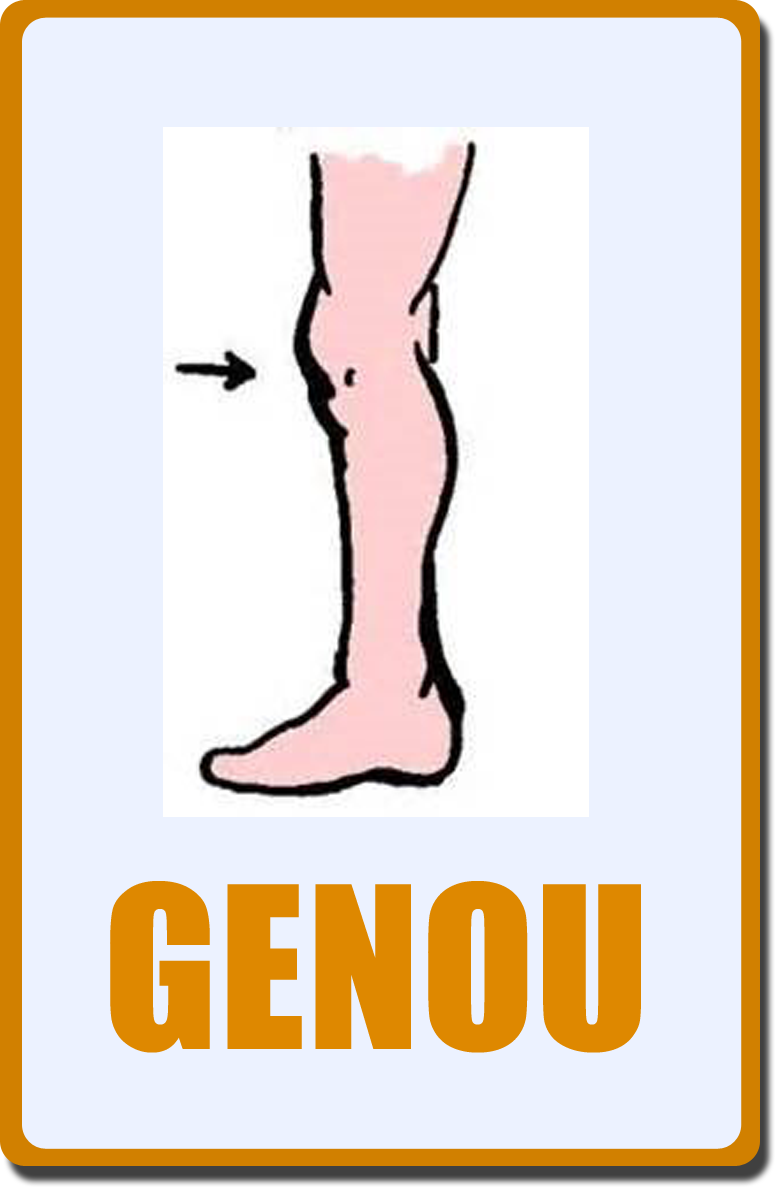
<style>
.page{position:relative;width:775px;height:1187px;background:#ecf2ff}
.page>*{position:absolute;margin:0}
.t1{font:208.3px "Impact";letter-spacing:0.005em;color:#de8800}
</style>
<div class="page">
<p class="t1" style="left:110px;top:881px;width:531px;height:172px">GENOU</p>
</div>
